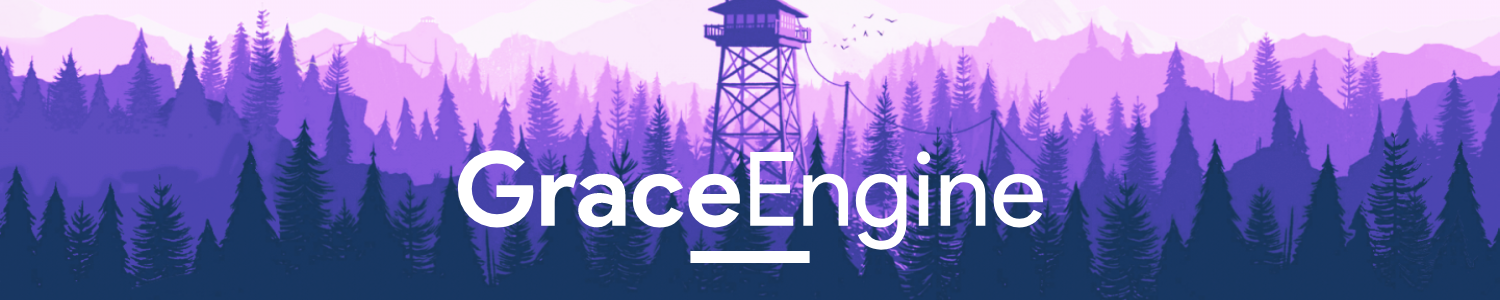
<style>
.page{position:relative;width:1500px;height:300px}
.page>*{position:absolute;margin:0}
.t1{font:103px "ProductSans-Regular";color:#ffffff}
.t2{font:103px "ProductSans-Bold";color:#ffffff}
</style>
<div class="page">
<p class="t1" style="left:457px;top:150px;width:587px;height:100px"><span class="t2">Grace</span>Engine</p>
</div>
